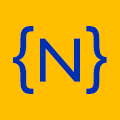
<style>
.page{position:relative;width:120px;height:120px;background:#ffbf00}
.page>*{position:absolute;margin:0}
.t1{font:72.4px "GillSans";color:#0030b2}
.t2{font:63.5px "GillSans";color:#0030b2}
</style>
<div class="page">
<p class="t1" style="left:13px;top:26px;width:94px;height:68px">{<span class="t2">N</span>}</p>
</div>
